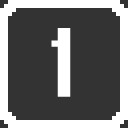
<style>
.page{position:relative;width:128px;height:128px;background:#333333}
.page>*{position:absolute;margin:0}
.t1{font:100px "PixelHigh";color:#ffffff}
</style>
<div class="page">
<p class="t1" style="left:51px;top:28px;width:20px;height:69px">1</p>
</div>
